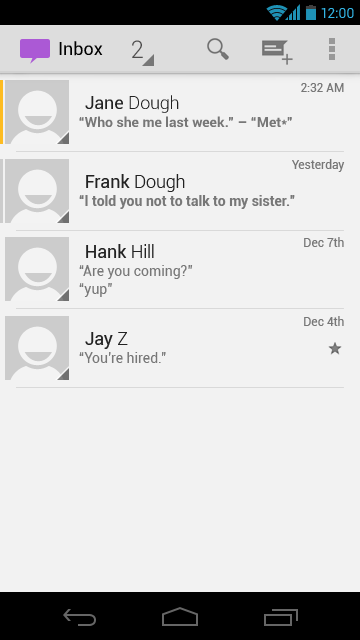
<style>
.page{position:relative;width:360px;height:640px;background:#f2f2f2}
.page>*{position:absolute;margin:0}
.t1{font:14px "Roboto-Regular";color:#33b5e5}
.t2{font:18px "Roboto-Regular";color:#000000}
.t3{font:24px "Roboto-Light";color:#4d4c4c}
.t4{font:12px "Roboto-Regular";color:#777777}
.t5{font:14px/18px "Roboto-Bold";color:#777777}
.t6{font:18px/18px "Roboto-Regular";color:#222222}
.t7{font:18px/18px "Roboto-Light";color:#222222}
.t8{font:14px/18px "Roboto-Regular";color:#777777}
</style>
<div class="page">
<p class="t1" style="left:321px;top:8px;width:33px;height:10px">12:00</p>
<p class="t2" style="left:59px;top:41px;width:44px;height:15px">Inbox</p>
<p class="t3" style="left:132px;top:40px;width:11px;height:18px">2</p>
<p class="t4" style="left:301px;top:83px;width:43px;height:9px">2:32 AM</p>
<p class="t5" style="left:79px;top:95px;width:213px;height:33px"><span class="t6">Jane</span><span class="t7"> Dough<br></span>“Who she me last week.” – “Met*”</p>
<p class="t4" style="left:292px;top:159px;width:53px;height:13px">Yesterday</p>
<p class="t5" style="left:79px;top:174px;width:216px;height:35px"><span class="t6">Frank </span><span class="t7">Dough<br></span>“I told you not to talk to my sister.”</p>
<p class="t8" style="left:79px;top:244px;width:114px;height:53px"><span class="t6">Hank</span><span class="t7"> Hill<br></span>“Are you coming?”<br>“yup”</p>
<p class="t4" style="left:304px;top:237px;width:40px;height:10px">Dec 7th</p>
<p class="t4" style="left:304px;top:316px;width:40px;height:10px">Dec 4th</p>
<p class="t8" style="left:79px;top:332px;width:87px;height:31px"><span class="t6">Jay</span><span class="t7"> Z<br></span>“You’re hired.”</p>
</div>
